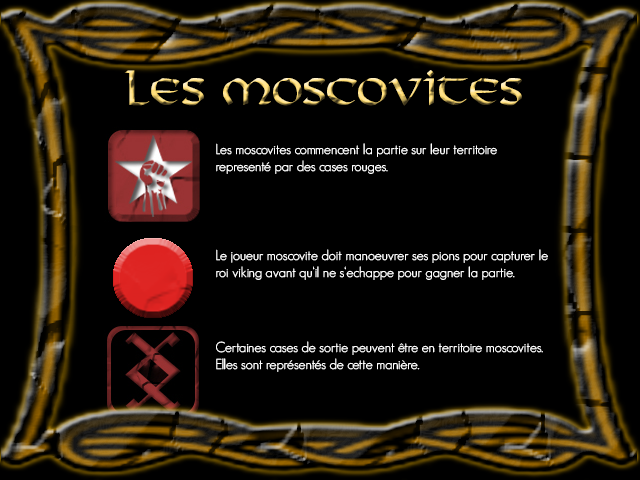
<style>
.page{position:relative;width:640px;height:480px;background:#000000}
.page>*{position:absolute;margin:0}
.t1{font:36px "Viking-Normal"}
.t2{font:14px "GeosansLight";color:#ffffff}
</style>
<div class="page">
<p class="t1" style="left:124px;top:70px;width:398px;height:36px">Les moscovites</p>
<p class="t2" style="left:216px;top:143px;width:281px;height:31px">Les moscovites commencent la partie sur leur territoire representé par des cases rouges.</p>
<p class="t2" style="left:216px;top:249px;width:332px;height:31px">Le joueur moscovite doit manoeuvrer ses pions pour capturer le roi viking avant qu‘il ne s‘echappe pour gagner la partie.</p>
<p class="t2" style="left:216px;top:341px;width:327px;height:31px">Certaines cases de sortie peuvent être en territoire moscovites. Elles sont représentés de cette manière.</p>
</div>
